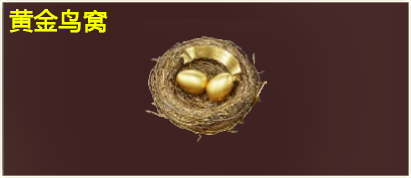
<style>
.page{position:relative;width:411px;height:178px}
.page>*{position:absolute;margin:0}
.t1{font:24px "MicrosoftYaHeiUI";color:#f4ff00;font-weight:bold}
</style>
<div class="page">
<p class="t1" style="left:9px;top:9px;width:99px;height:24px">黄金鸟窝</p>
</div>
